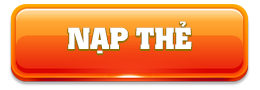
<style>
.page{position:relative;width:260px;height:90px;background:#ffffff}
.page>*{position:absolute;margin:0}
.t1{font:30px "UTM-Colossalis";color:#ffffff}
</style>
<div class="page">
<p class="t1" style="left:68px;top:21px;width:124px;height:33px">NẠP THẺ</p>
</div>
